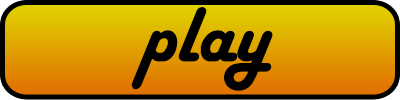
<style>
.page{position:relative;width:400px;height:100px}
.page>*{position:absolute;margin:0}
.t1{font:81.3px "HarlowSolid";color:#000000}
</style>
<div class="page">
<p class="t1" style="left:131px;top:7px;width:142px;height:84px">play</p>
</div>
